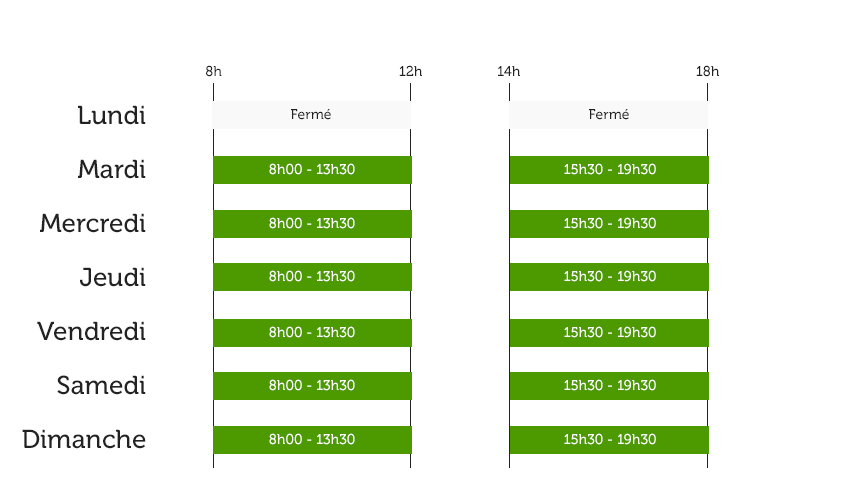
<style>
.page{position:relative;width:850px;height:500px;background:#ffffff}
.page>*{position:absolute;margin:0}
.t1{font:14px "Museo-500";color:#222222}
.t2{font:26px/54px "Museo-500";color:#222222}
.t3{font:14px "Museo-500";color:#ffffff}
</style>
<div class="page">
<p class="t1" style="left:206px;top:65px;width:16px;height:12px">8h</p>
<p class="t1" style="left:399px;top:65px;width:23px;height:11px">12h</p>
<p class="t1" style="left:696px;top:65px;width:23px;height:12px">18h</p>
<p class="t1" style="left:498px;top:66px;width:22px;height:10px">14h</p>
<p class="t2" style="left:22px;top:105px;width:124px;height:344px;text-align:right">Lundi<br>Mardi<br>Mercredi<br>Jeudi<br>Vendredi<br>Samedi<br>Dimanche</p>
<p class="t1" style="left:291px;top:109px;width:40px;height:11px">Fermé</p>
<p class="t1" style="left:589px;top:109px;width:40px;height:11px">Fermé</p>
<p class="t3" style="left:269px;top:163px;width:86px;height:12px">8h00 - 13h30</p>
<p class="t3" style="left:564px;top:163px;width:92px;height:12px">15h30 - 19h30</p>
<p class="t3" style="left:269px;top:217px;width:86px;height:12px">8h00 - 13h30</p>
<p class="t3" style="left:564px;top:217px;width:92px;height:12px">15h30 - 19h30</p>
<p class="t3" style="left:269px;top:270px;width:86px;height:12px">8h00 - 13h30</p>
<p class="t3" style="left:564px;top:270px;width:92px;height:12px">15h30 - 19h30</p>
<p class="t3" style="left:269px;top:326px;width:86px;height:12px">8h00 - 13h30</p>
<p class="t3" style="left:564px;top:326px;width:92px;height:12px">15h30 - 19h30</p>
<p class="t3" style="left:269px;top:379px;width:86px;height:12px">8h00 - 13h30</p>
<p class="t3" style="left:564px;top:379px;width:92px;height:12px">15h30 - 19h30</p>
<p class="t3" style="left:269px;top:433px;width:86px;height:12px">8h00 - 13h30</p>
<p class="t3" style="left:564px;top:433px;width:92px;height:12px">15h30 - 19h30</p>
</div>
